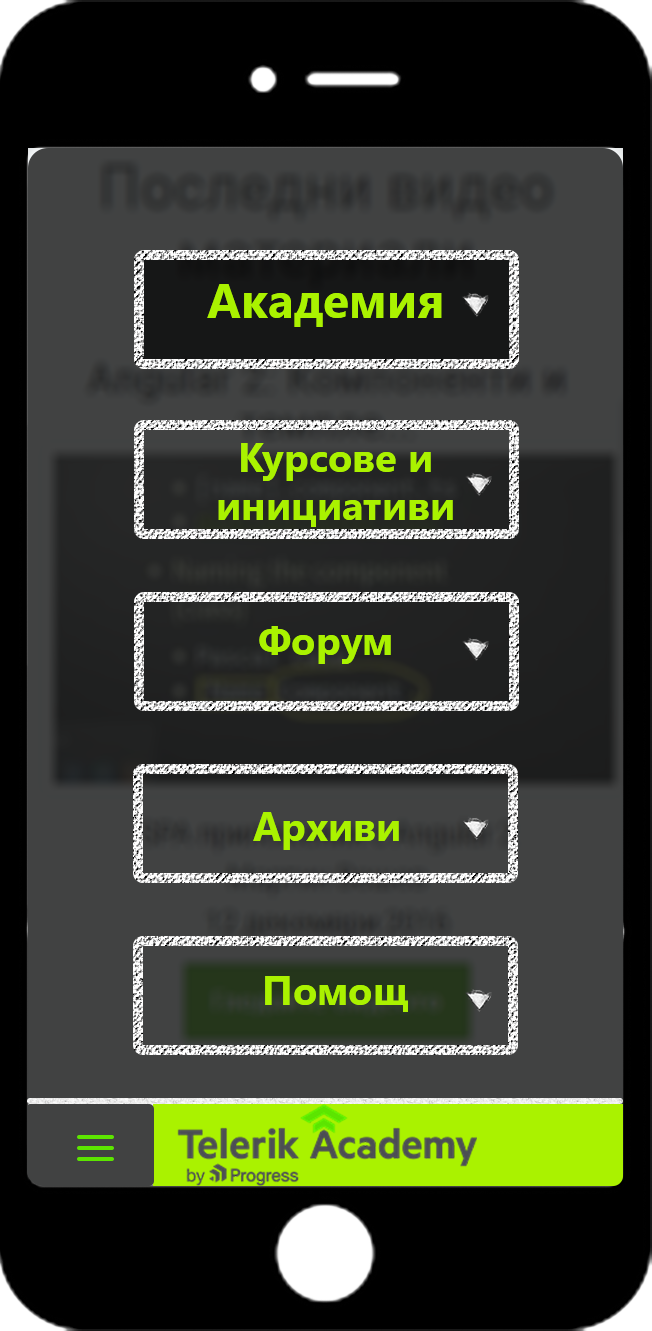
<style>
.page{position:relative;width:652px;height:1331px;background:#000000}
.page>*{position:absolute;margin:0}
.t1{font:48px "SegoeUI-Bold";color:#aaf200}
.t2{font:48px "MyriadPro-Regular";color:#aaf200}
.t3{font:40px "SegoeUI-Bold";color:#aaf200}
</style>
<div class="page">
<p class="t1" style="left:207px;top:284px;width:235px;height:43px"><span class="t2"><br></span>Академия</p>
<p class="t3" style="left:218px;top:443px;width:235px;height:84px;text-align:center">Курсове и инициативи</p>
<p class="t3" style="left:259px;top:626px;width:132px;height:38px">Форум</p>
<p class="t3" style="left:253px;top:812px;width:146px;height:38px">Архиви</p>
<p class="t3" style="left:265px;top:976px;width:143px;height:36px">Помощ</p>
</div>
